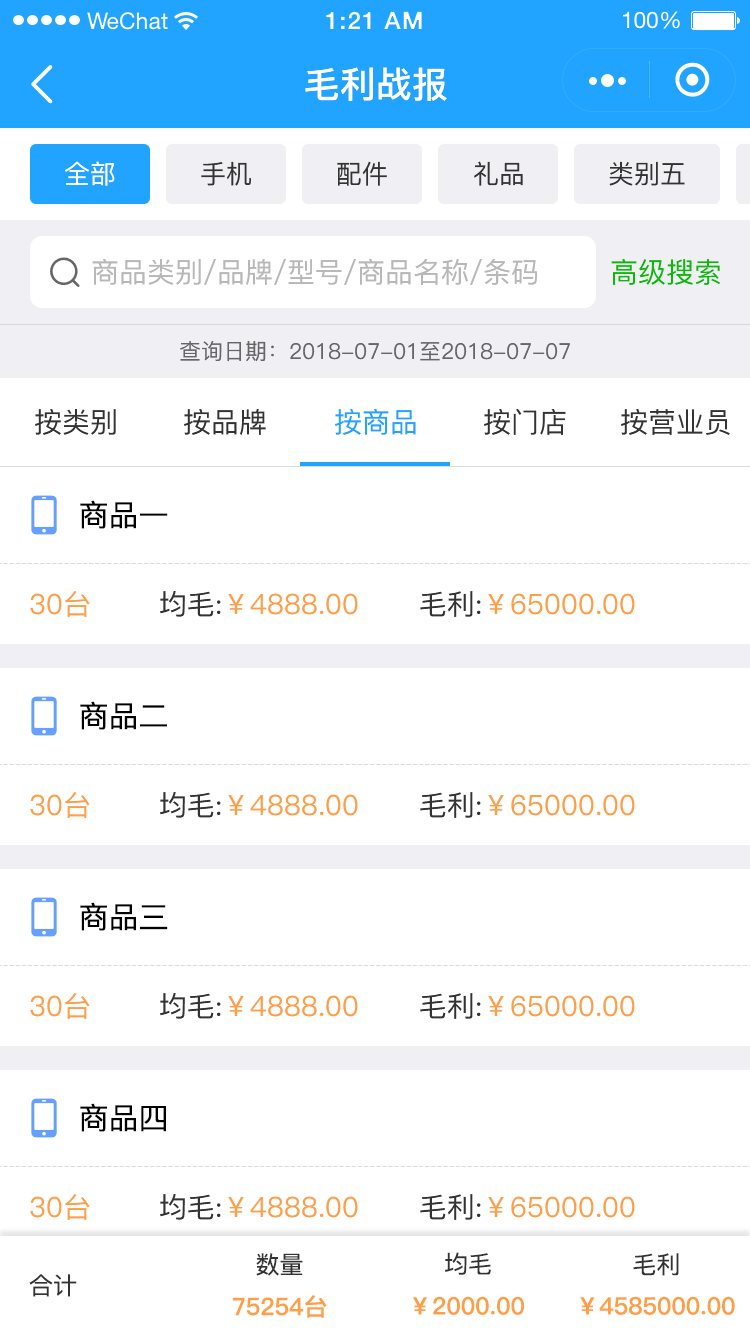
<style>
.page{position:relative;width:750px;height:1334px;background:#ffffff}
.page>*{position:absolute;margin:0}
.t1{font:36px "PingFang-SC-Bold";color:#ffffff}
.t2{font:26px "PingFang-SC-Medium";color:#ffffff}
.t3{font:26px "PingFang-SC-Medium";color:#333333}
.t4{font:28px "PingFang-SC-Medium";color:#b8b8b8}
.t5{font:28px "PingFang-SC-Medium";color:#09bb07}
.t6{font:22px "PingFang-SC-Medium";color:#666666}
.t7{font:28px "PingFang-SC-Medium";color:#333333}
.t8{font:28px "PingFang-SC-Medium";color:#21a4ff}
.t9{font:30px "PingFang-SC-Medium";color:#000000}
.t10{font:28px "PingFang-SC-Medium";color:#fe9f45}
.t11{font:24px "PingFang-SC-Medium";color:#333333}
.t12{font:24px "PingFang-SC-Bold";color:#fe9f45}
</style>
<div class="page">
<p class="t1" style="left:305px;top:67px;width:142px;height:34px">毛利战报</p>
<p class="t2" style="left:65px;top:161px;width:50px;height:25px">全部</p>
<p class="t3" style="left:201px;top:161px;width:50px;height:25px">手机</p>
<p class="t3" style="left:337px;top:161px;width:50px;height:25px">配件</p>
<p class="t3" style="left:474px;top:161px;width:49px;height:25px">礼品</p>
<p class="t3" style="left:609px;top:161px;width:76px;height:25px">类别五</p>
<p class="t4" style="left:92px;top:258px;width:445px;height:27px">商品类别/品牌/型号/商品名称/条码</p>
<p class="t5" style="left:611px;top:259px;width:109px;height:26px">高级搜索</p>
<p class="t6" style="left:180px;top:341px;width:390px;height:21px">查询日期：2018-07-01至2018-07-07</p>
<p class="t7" style="left:35px;top:409px;width:81px;height:26px">按类别</p>
<p class="t7" style="left:184px;top:409px;width:82px;height:26px">按品牌</p>
<p class="t8" style="left:335px;top:409px;width:81px;height:26px">按商品</p>
<p class="t7" style="left:484px;top:409px;width:82px;height:26px">按门店</p>
<p class="t7" style="left:621px;top:409px;width:109px;height:26px">按营业员</p>
<p class="t9" style="left:80px;top:500px;width:88px;height:29px">商品一</p>
<p class="t10" style="left:30px;top:591px;width:60px;height:26px">30台</p>
<p class="t10" style="left:160px;top:591px;width:198px;height:26px"><span class="t7">均毛:</span>￥4888.00</p>
<p class="t10" style="left:420px;top:591px;width:215px;height:26px"><span class="t7">毛利:</span>￥65000.00</p>
<p class="t9" style="left:80px;top:701px;width:87px;height:29px">商品二</p>
<p class="t10" style="left:30px;top:792px;width:60px;height:26px">30台</p>
<p class="t10" style="left:160px;top:792px;width:198px;height:26px"><span class="t7">均毛:</span>￥4888.00</p>
<p class="t10" style="left:420px;top:792px;width:215px;height:26px"><span class="t7">毛利:</span>￥65000.00</p>
<p class="t9" style="left:80px;top:902px;width:88px;height:29px">商品三</p>
<p class="t10" style="left:30px;top:993px;width:60px;height:26px">30台</p>
<p class="t10" style="left:160px;top:993px;width:198px;height:26px"><span class="t7">均毛:</span>￥4888.00</p>
<p class="t10" style="left:420px;top:993px;width:215px;height:26px"><span class="t7">毛利:</span>￥65000.00</p>
<p class="t9" style="left:80px;top:1103px;width:86px;height:29px">商品四</p>
<p class="t10" style="left:30px;top:1194px;width:60px;height:26px">30台</p>
<p class="t10" style="left:160px;top:1194px;width:198px;height:26px"><span class="t7">均毛:</span>￥4888.00</p>
<p class="t10" style="left:420px;top:1194px;width:215px;height:26px"><span class="t7">毛利:</span>￥65000.00</p>
<p class="t11" style="left:256px;top:1253px;width:47px;height:23px">数量</p>
<p class="t11" style="left:445px;top:1252px;width:46px;height:23px">均毛</p>
<p class="t11" style="left:633px;top:1253px;width:46px;height:23px">毛利</p>
<p class="t11" style="left:29px;top:1274px;width:48px;height:23px">合计</p>
<p class="t12" style="left:232px;top:1295px;width:95px;height:23px">75254台</p>
<p class="t12" style="left:413px;top:1296px;width:111px;height:19px">￥2000.00</p>
<p class="t12" style="left:580px;top:1296px;width:155px;height:19px">￥4585000.00</p>
</div>
